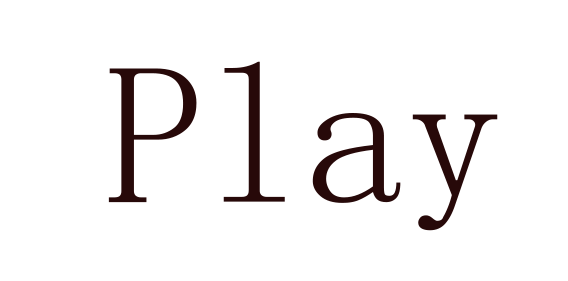
<style>
.page{position:relative;width:568px;height:281px;background:#ffffff}
.page>*{position:absolute;margin:0}
.t1{font:200px "SimSun-ExtB";color:#270909}
</style>
<div class="page">
<p class="t1" style="left:108px;top:61px;width:390px;height:170px">Play</p>
</div>
